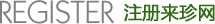
<style>
.page{position:relative;width:215px;height:24px;background:#ffffff}
.page>*{position:absolute;margin:0}
.t1{font:18px "MicrosoftYaHei";color:#2f6914;font-weight:bold}
</style>
<div class="page">
<p class="t1" style="left:124px;top:3px;width:91px;height:19px">注册来珍网</p>
</div>
